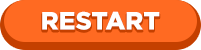
<style>
.page{position:relative;width:201px;height:50px;background:#ff6a22}
.page>*{position:absolute;margin:0}
.t1{font:25px "GothamPro-Black";color:#ffffff}
</style>
<div class="page">
<p class="t1" style="left:42px;top:11px;width:118px;height:19px">RESTART</p>
</div>
